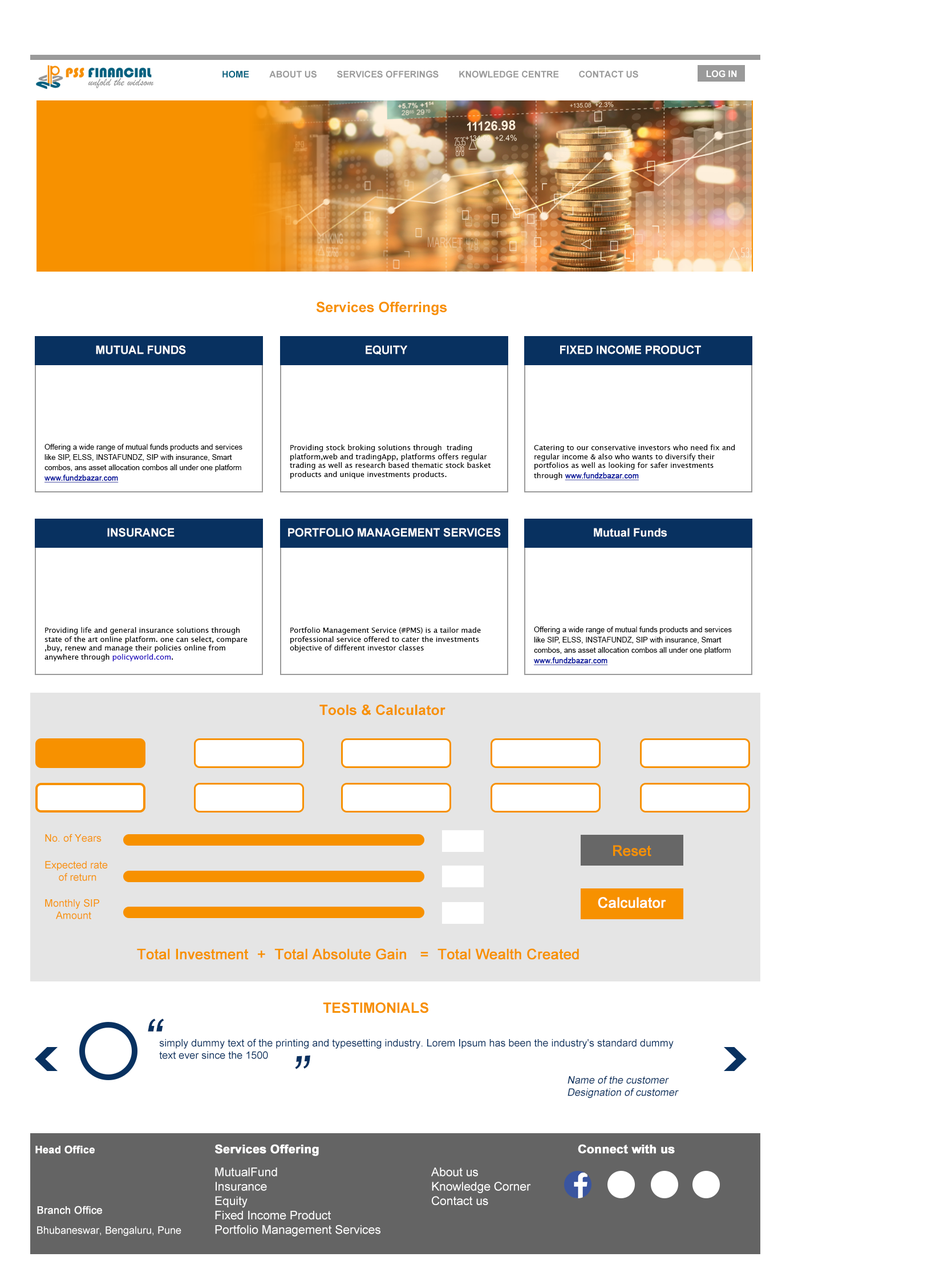
<style>
.page{position:relative;width:940px;height:1269px;background:#ffffff}
.page>*{position:absolute;margin:0}
.t1{font:9.1px "Arial-BoldMT";color:#03617f;text-transform:uppercase}
.t2{font:9.1px "Arial-BoldMT";color:#9a9a9a;text-transform:uppercase}
.t3{font:9.1px "Arial-BoldMT";color:#ffffff;text-transform:uppercase}
.t4{font:14.3px "Arial-BoldMT";color:#f79100}
.t5{font:11.4px "Arial-BoldMT";color:#ffffff;text-transform:uppercase}
.t6{font:7.4px/10.3px "ArialMT";color:#000000}
.t7{font:7.4px/10.3px "ArialMT";color:#000f9b;font-weight:bold;text-decoration:underline}
.t8{font:7.4px "LucidaSansUnicode";color:#000000}
.t9{font:11.4px "Arial-BoldMT";color:#ffffff}
.t10{font:7.4px "LucidaSansUnicode";color:#1801bd}
.t11{font:10.3px "ArialMT";color:#f79100}
.t12{font:14.3px "ArialMT";color:#f79100;font-weight:bold}
.t13{font:14.3px "ArialMT";color:#ffffff;font-weight:bold}
.t14{font:14.3px "Arial-BoldMT";color:#f79100;text-transform:uppercase}
.t15{font:54.8px "ArialMT";color:#083160;font-style:italic}
.t16{font:10.3px "ArialMT";color:#083160}
.t17{font:10.3px "ArialMT";color:#083160;font-style:italic}
.t18{font:10.3px "Arial-BoldMT";color:#ffffff;font-weight:bold}
.t19{font:12px "Arial-BoldMT";color:#ffffff;font-weight:bold}
.t20{font:12px "ArialMT";color:#ffffff}
.t21{font:10.3px "ArialMT";color:#ffffff;font-weight:bold}
.t22{font:10.3px "ArialMT";color:#ffffff}
</style>
<div class="page">
<p class="t1" style="left:222px;top:71px;width:27px;height:7px">Home</p>
<p class="t2" style="left:269px;top:71px;width:48px;height:7px">About us</p>
<p class="t2" style="left:337px;top:71px;width:102px;height:7px">Services Offerings</p>
<p class="t2" style="left:459px;top:71px;width:100px;height:7px">Knowledge Centre</p>
<p class="t2" style="left:579px;top:71px;width:59px;height:7px">contact us</p>
<p class="t3" style="left:706px;top:70px;width:31px;height:8px">Log in</p>
<p class="t4" style="left:316px;top:301px;width:131px;height:14px">Services Offerrings</p>
<p class="t5" style="left:96px;top:345px;width:90px;height:9px">Mutual Funds</p>
<p class="t5" style="left:366px;top:345px;width:41px;height:10px">Equity</p>
<p class="t5" style="left:560px;top:345px;width:141px;height:9px">Fixed income product</p>
<p class="t6" style="left:44px;top:444px;width:198px;height:39px">Offering a wide range of mutual funds products and services like SIP, ELSS, INSTAFUNDZ, SIP with insurance, Smart combos, ans asset allocation combos all under one platform <span class="t7">www.fundzbazar.com</span></p>
<p class="t8" style="left:290px;top:444px;width:201px;height:35px">Providing stock broking solutions through  trading platform,web and tradingApp, platforms offers regular trading as well as research based thematic stock basket products and unique investments products.</p>
<p class="t8" style="left:534px;top:444px;width:201px;height:36px">Catering to our conservative investors who need fix and regular income &amp; also who wants to diversify their portfolios as well as looking for safer investments through <span class="t7">www.fundzbazar.com</span></p>
<p class="t9" style="left:107px;top:528px;width:68px;height:9px">INSURANCE</p>
<p class="t9" style="left:288px;top:528px;width:213px;height:9px">PORTFOLIO MANAGEMENT SERVICES</p>
<p class="t9" style="left:594px;top:528px;width:73px;height:9px">Mutual Funds</p>
<p class="t8" style="left:44px;top:627px;width:204px;height:34px">Providing life and general insurance solutions through state of the art online platform. one can select, compare ,buy, renew and manage their policies online from anywhere through <span class="t10">policyworld.com</span>.</p>
<p class="t8" style="left:290px;top:627px;width:191px;height:25px">Portfolio Management Service (#PMS) is a tailor made professional service offered to cater the investments objective of different investor classes</p>
<p class="t6" style="left:534px;top:626px;width:198px;height:39px">Offering a wide range of mutual funds products and services like SIP, ELSS, INSTAFUNDZ, SIP with insurance, Smart combos, ans asset allocation combos all under one platform <span class="t7">www.fundzbazar.com</span></p>
<p class="t4" style="left:319px;top:704px;width:126px;height:11px">Tools &amp; Calculator</p>
<p class="t11" style="left:45px;top:833px;width:57px;height:9px">No. of Years</p>
<p class="t12" style="left:613px;top:845px;width:38px;height:11px">Reset</p>
<p class="t11" style="left:45px;top:861px;width:63px;height:20px;text-align:center">Expected rate <br>of return</p>
<p class="t11" style="left:45px;top:898px;width:54px;height:21px;text-align:center">Monthly SIP <br>Amount</p>
<p class="t13" style="left:598px;top:897px;width:68px;height:11px">Calculator</p>
<p class="t12" style="left:137px;top:948px;width:442px;height:11px">Total Investment  +  Total Absolute Gain   =  Total Wealth Created</p>
<p class="t14" style="left:323px;top:1002px;width:105px;height:11px">Testimonials</p>
<p class="t15" style="left:148px;top:1018px;width:16px;height:13px">“</p>
<p class="t16" style="left:159px;top:1038px;width:515px;height:21px">simply dummy text of the printing and typesetting industry. Lorem Ipsum has been the industry's standard dummy text ever since the 1500</p>
<p class="t15" style="left:295px;top:1055px;width:15px;height:14px;rotate:177deg">“</p>
<p class="t17" style="left:568px;top:1075px;width:111px;height:23px">Name of the customer<br>Designation of customer</p>
<p class="t18" style="left:35px;top:1145px;width:60px;height:8px">Head Office</p>
<p class="t19" style="left:215px;top:1144px;width:104px;height:12px">Services Offering</p>
<p class="t19" style="left:578px;top:1144px;width:97px;height:9px">Connect with us</p>
<p class="t20" style="left:215px;top:1167px;width:165px;height:69px">MutualFund<br>Insurance<br>Equity<br>Fixed Income Product<br>Portfolio Management Services</p>
<p class="t20" style="left:431px;top:1167px;width:100px;height:38px">About us<br>Knowledge Corner<br>Contact us</p>
<p class="t21" style="left:37px;top:1205px;width:65px;height:9px">Branch Office</p>
<p class="t22" style="left:37px;top:1226px;width:144px;height:9px">Bhubaneswar, Bengaluru, Pune</p>
</div>
